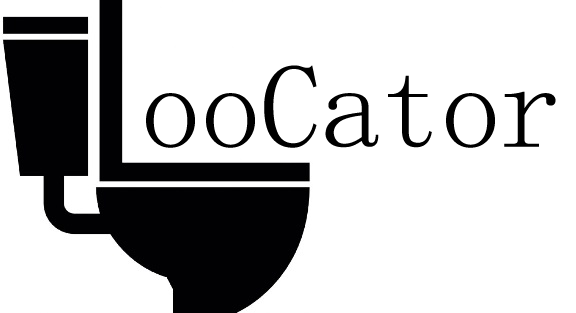
<style>
.page{position:relative;width:576px;height:313px;background:#ffffff}
.page>*{position:absolute;margin:0}
.t1{font:120px "SimSun-ExtB";color:#000000}
</style>
<div class="page">
<p class="t1" style="left:146px;top:65px;width:410px;height:83px">ooCator</p>
</div>
